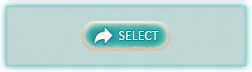
<style>
.page{position:relative;width:252px;height:72px}
.page>*{position:absolute;margin:0}
.t1{font:14px "Calibri";color:#ffffff}
</style>
<div class="page">
<p class="t1" style="left:118px;top:31px;width:41px;height:9px">SELECT</p>
</div>
